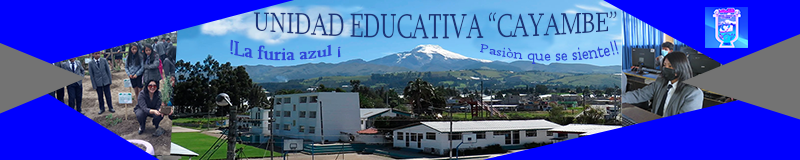
<style>
.page{position:relative;width:800px;height:160px;background:#0000ff}
.page>*{position:absolute;margin:0}
.t1{font:24px "Sylfaen";letter-spacing:-0.025em;color:#1c3477}
.t2{font:18.7px "Sylfaen";letter-spacing:-0.025em;color:#2f46d8}
.t3{font:16px "Sylfaen";letter-spacing:-0.025em;color:#2f46d8}
</style>
<div class="page">
<p class="t1" style="left:253px;top:11px;width:364px;height:28px">UNIDAD EDUCATIVA “CAYAMBE”</p>
<p class="t2" style="left:230px;top:39px;width:111px;height:22px">!La furia azul ¡</p>
<p class="t3" style="left:480px;top:40px;width:139px;height:25px">Pasiòn que se siente!!</p>
</div>
